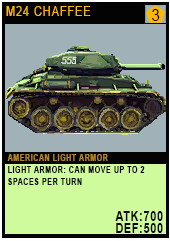
<style>
.page{position:relative;width:170px;height:241px;background:#a0b2b8}
.page>*{position:absolute;margin:0}
.t1{font:12.8px "ArialMT";letter-spacing:0.08em;color:#ffb800;text-transform:uppercase;scale:0.86 1}
.t2{font:17.4px "ArialMT";letter-spacing:0.08em;color:#030200;text-transform:uppercase;scale:0.86 1}
.t3{font:9.3px/12px "Arial-BoldMT";letter-spacing:0.08em;color:#020100;text-transform:uppercase;scale:0.76 1}
.t4{font:9.3px/20.2px "Arial-BoldMT";letter-spacing:0.08em;color:#b4832c;text-transform:uppercase;scale:0.76 1}
.t5{font:13.9px/12px "Arial-BoldMT";letter-spacing:0.08em;color:#050606;text-transform:uppercase;scale:0.76 1}
</style>
<div class="page">
<p class="t1" style="left:6px;top:6px;width:85px;height:10px">M24 Chaffee</p>
<p class="t2" style="left:152px;top:9px;width:8px;height:12px">3</p>
<p class="t3" style="left:7px;top:154px;width:156px;height:79px"><span class="t4">American Light armor<br></span>Light Armor: Can move up to 2 spaces per turn<br><br><br><span class="t5">atk:700<br>def:500</span></p>
</div>
